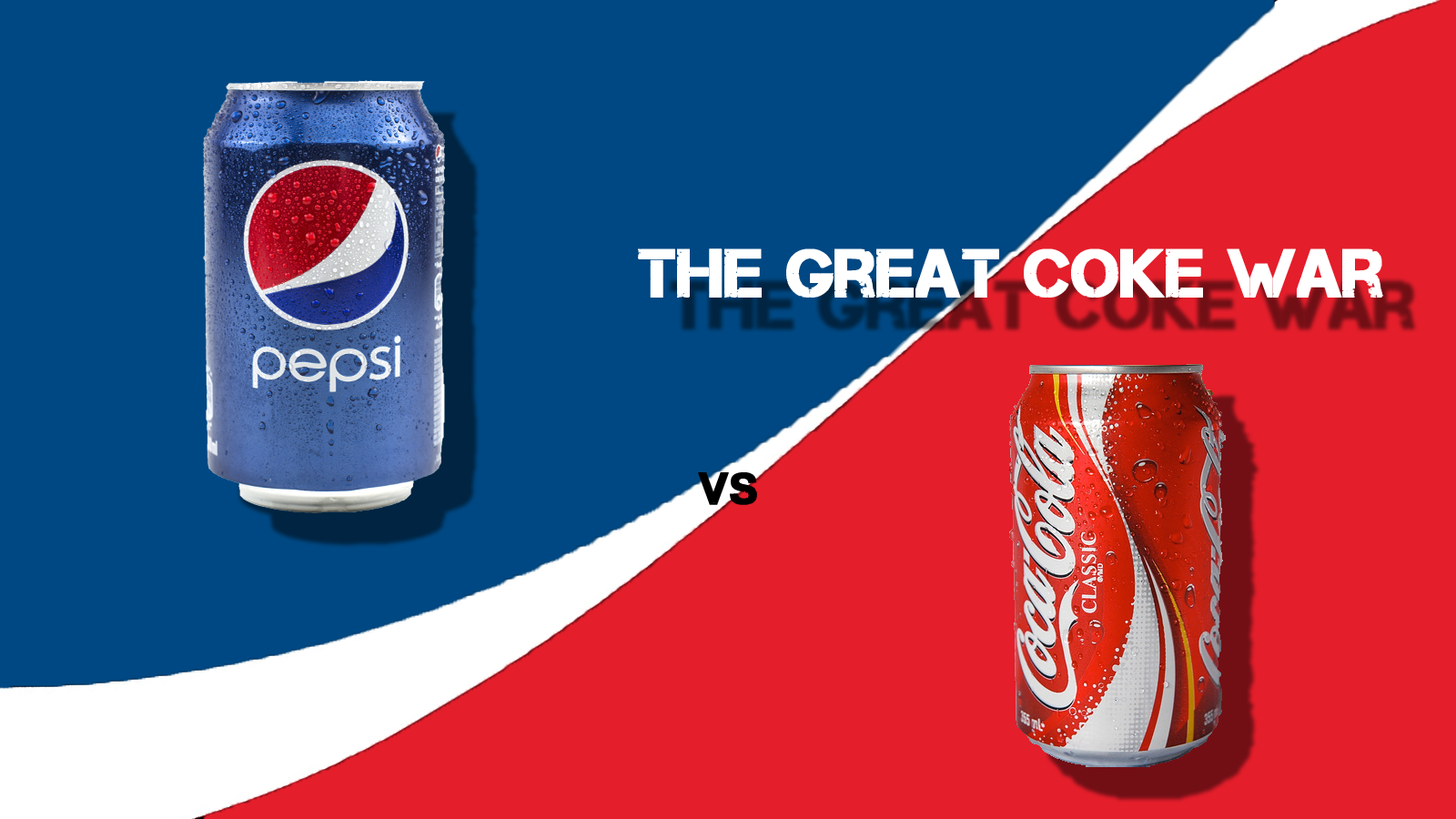
<style>
.page{position:relative;width:1456px;height:819px;background:#004883}
.page>*{position:absolute;margin:0}
.t1{font:68.2px "Captureit";color:#ffffff;font-weight:bold}
.t2{font:45.5px "Captureit";color:#000000;font-weight:bold}
</style>
<div class="page">
<p class="t1" style="left:638px;top:248px;width:745px;height:50px">The Great Coke War</p>
<p class="t2" style="left:698px;top:472px;width:59px;height:33px">VS</p>
</div>
